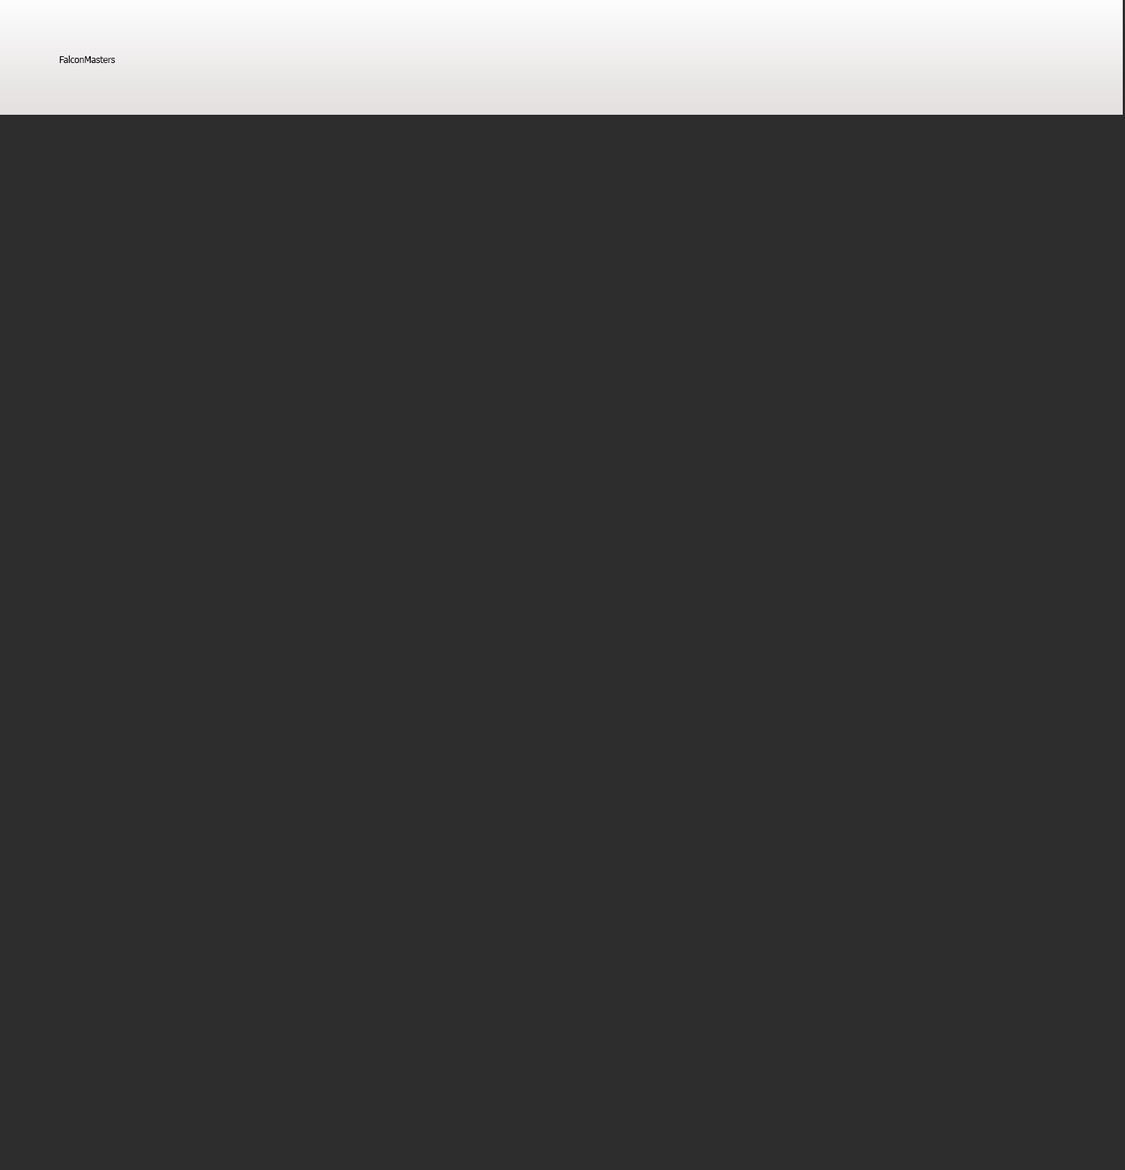
<style>
.page{position:relative;width:1125px;height:1170px;background:#2d2d2d}
.page>*{position:absolute;margin:0}
.t1{font:9px "Tahoma";color:#000000}
</style>
<div class="page">
<p class="t1" style="left:59px;top:56px;width:57px;height:7px">FalconMasters</p>
</div>
